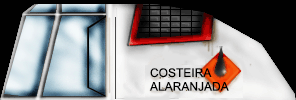
<style>
.page{position:relative;width:296px;height:100px;background:#010101}
.page>*{position:absolute;margin:0}
.t1{font:12px/13.7px "ArialMT";color:#000000}
</style>
<div class="page">
<p class="t1" style="left:149px;top:68px;width:80px;height:23px">COSTEIRA<br>ALARANJADA</p>
</div>
